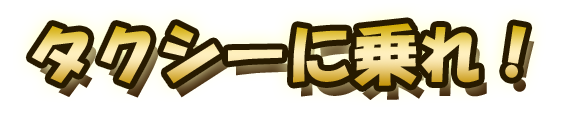
<style>
.page{position:relative;width:564px;height:116px;background:#ffffff}
.page>*{position:absolute;margin:0}
.t1{font:64.8px "HGSoeiKakupoptai"}
</style>
<div class="page">
<p class="t1" style="left:31px;top:23px;width:496px;height:63px">タクシーに乗れ！</p>
</div>
